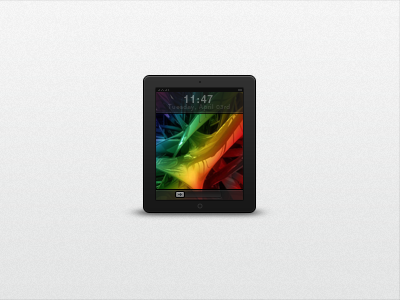
<style>
.page{position:relative;width:400px;height:300px}
.page>*{position:absolute;margin:0}
.t1{font:10px "HelveticaNeueLTPro-Md";letter-spacing:0.1em;color:#6a7470}
.t2{font:5.9px "HelveticaNeueLTPro-Roman";letter-spacing:0.1em;color:#303b35}
</style>
<div class="page">
<p class="t1" style="left:184px;top:95px;width:29px;height:8px">11:47</p>
<p class="t2" style="left:168px;top:104px;width:62px;height:7px">Tuesday, April 03rd</p>
</div>
